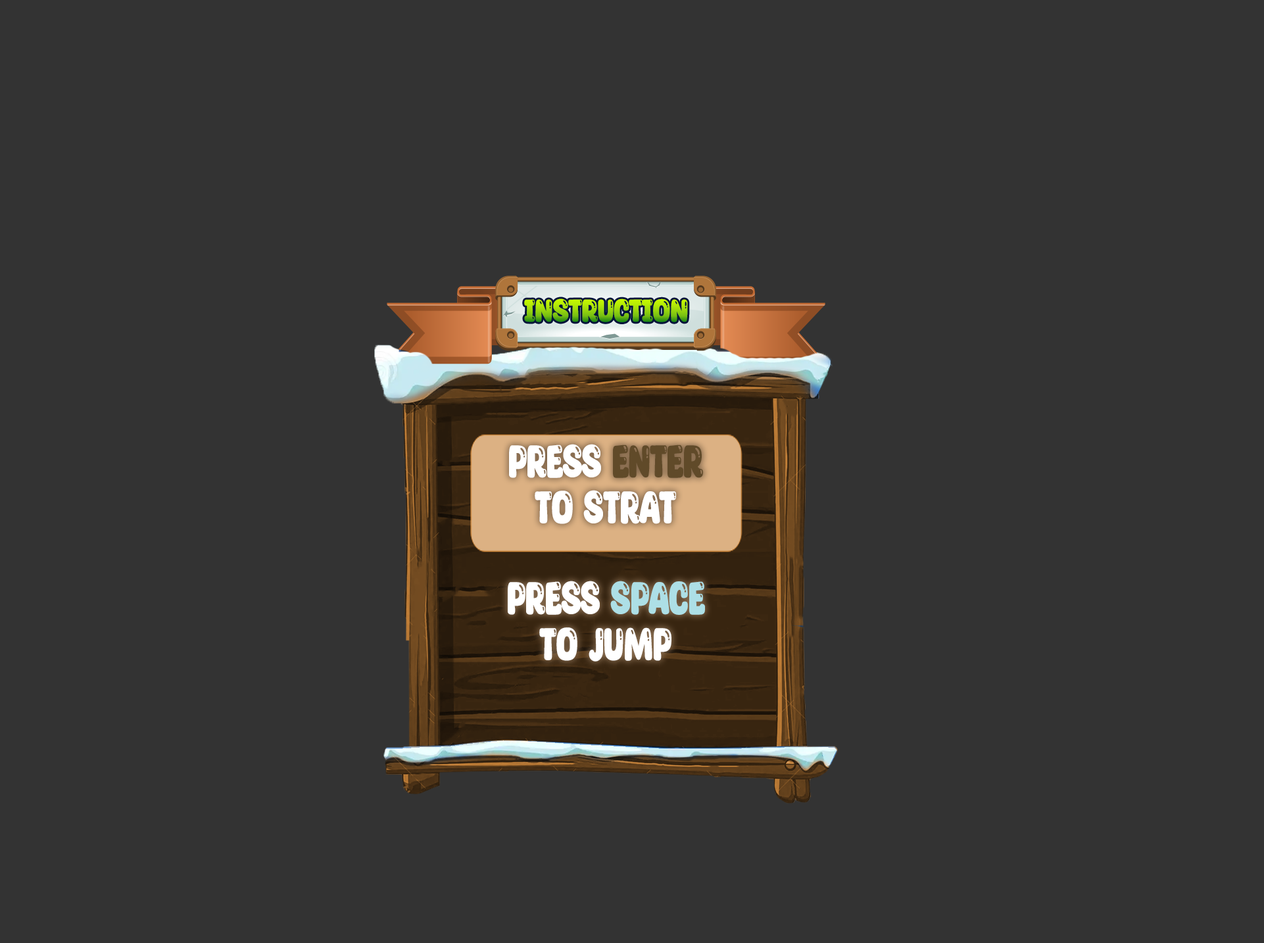
<style>
.page{position:relative;width:1264px;height:943px;background:#333333}
.page>*{position:absolute;margin:0}
.t1{font:36.2px "GlossySheen-Shine";letter-spacing:-0.02em}
.t2{font:52.1px/45.6px "GlossySheen-Shine";letter-spacing:-0.02em;color:#ffffff;scale:0.85 1}
.t3{font:52.1px/45.6px "GlossySheen-Shine";letter-spacing:-0.02em;color:#604a29;scale:0.85 1}
.t4{font:52.1px/45.6px "GlossySheen-Shine";letter-spacing:-0.02em;color:#addfe6;scale:0.85 1}
</style>
<div class="page">
<p class="t1" style="left:524px;top:299px;width:164px;height:23px">instruction</p>
<p class="t2" style="left:508px;top:444px;width:197px;height:218px;text-align:center">press <span class="t3">enter </span>to strat<br><br>press <span class="t4">space</span> to jump</p>
</div>
